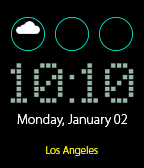
<style>
.page{position:relative;width:144px;height:168px;background:#000000}
.page>*{position:absolute;margin:0}
.t1{font:14px "MyriadPro-Light";color:#ffffff}
.t2{font:11px "MyriadPro-Light";color:#fff600}
</style>
<div class="page">
<p class="t1" style="left:17px;top:114px;width:110px;height:13px">Monday, January 02</p>
<p class="t2" style="left:46px;top:146px;width:52px;height:10px">Los Angeles</p>
</div>
